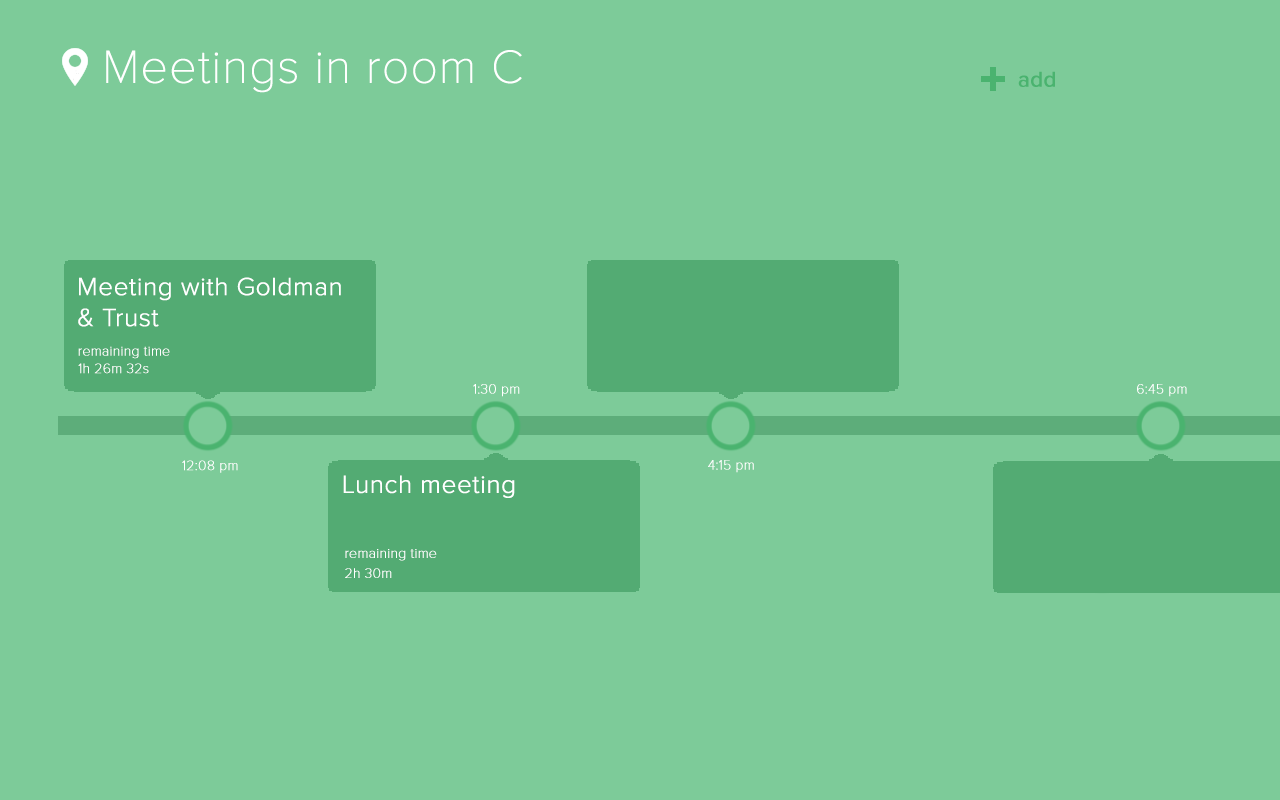
<style>
.page{position:relative;width:1280px;height:800px;background:#7dcb99}
.page>*{position:absolute;margin:0}
.t1{font:48px "ProximaNova-Thin";color:#ffffff;font-weight:bold}
.t2{font:22px "ProximaNova-Regular";color:#4ab36f;font-weight:bold}
.t3{font:26px "ProximaNova-Light";color:#ffffff;font-weight:bold}
.t4{font:14px "ProximaNova-Thin";color:#ffffff;font-weight:bold}
.t5{font:14px/20px "ProximaNova-Thin";color:#ffffff;font-weight:bold}
</style>
<div class="page">
<p class="t1" style="left:106px;top:50px;width:416px;height:43px">Meetings in room C</p>
<p class="t2" style="left:1018px;top:71px;width:37px;height:16px">add</p>
<p class="t3" style="left:79px;top:277px;width:262px;height:24px">Meeting with Goldman</p>
<p class="t3" style="left:78px;top:308px;width:81px;height:19px">&amp; Trust</p>
<p class="t4" style="left:78px;top:346px;width:92px;height:13px">remaining time</p>
<p class="t4" style="left:78px;top:363px;width:71px;height:11px">1h 26m 32s</p>
<p class="t4" style="left:473px;top:384px;width:47px;height:13px">1:30 pm</p>
<p class="t4" style="left:1137px;top:384px;width:50px;height:13px">6:45 pm</p>
<p class="t4" style="left:182px;top:460px;width:56px;height:13px">12:08 pm</p>
<p class="t4" style="left:708px;top:460px;width:46px;height:13px">4:15 pm</p>
<p class="t3" style="left:343px;top:475px;width:172px;height:23px">Lunch meeting</p>
<p class="t5" style="left:345px;top:549px;width:92px;height:29px">remaining time<br>2h 30m</p>
</div>
